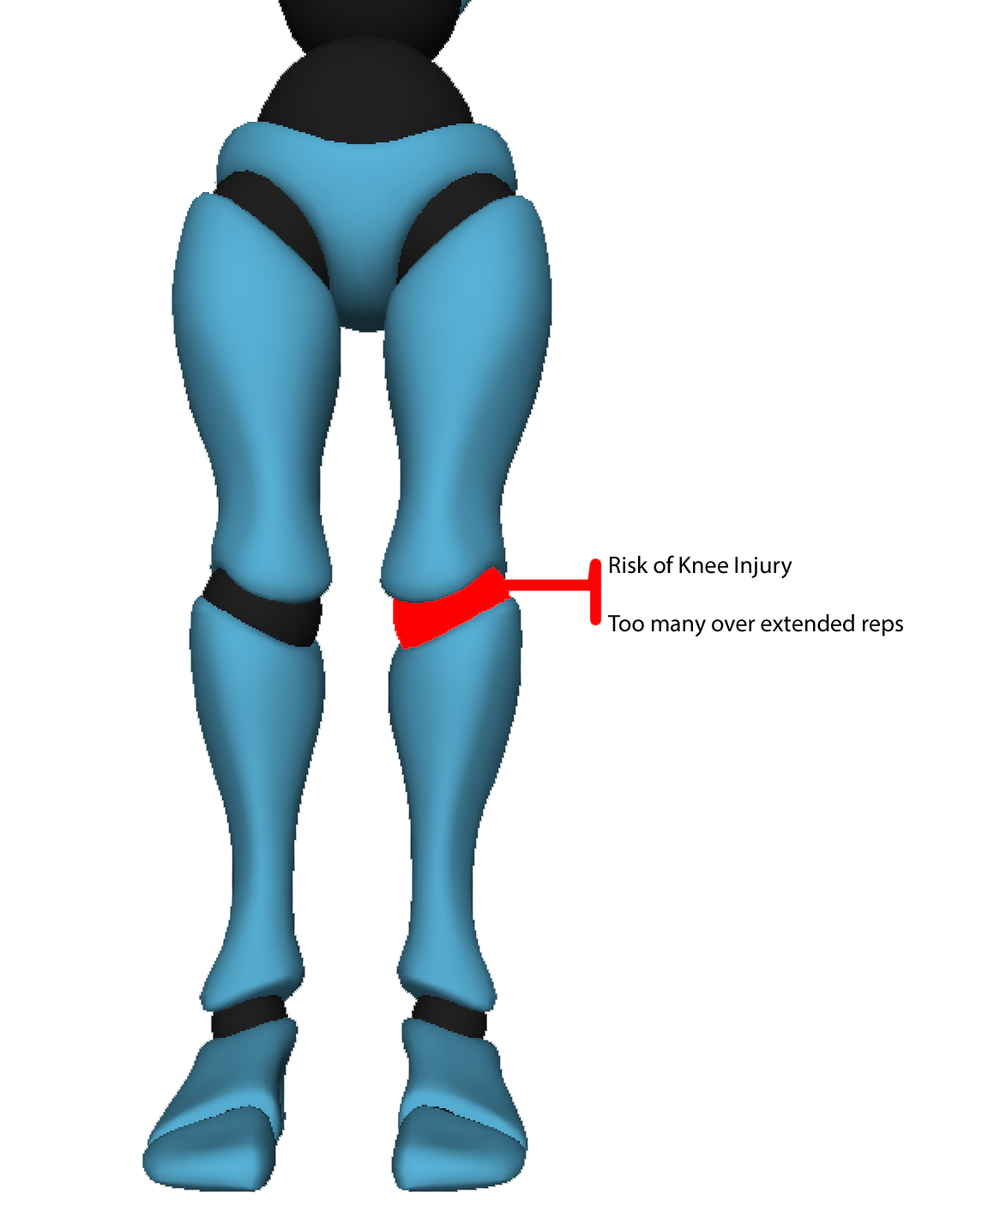
<style>
.page{position:relative;width:988px;height:1206px;background:#ffffff}
.page>*{position:absolute;margin:0}
.t1{font:24px/30.9px "MyriadPro-Regular";color:#000000}
</style>
<div class="page">
<p class="t1" style="left:608px;top:555px;width:295px;height:83px">Risk of Knee Injury<br>Too many over extended reps</p>
</div>
